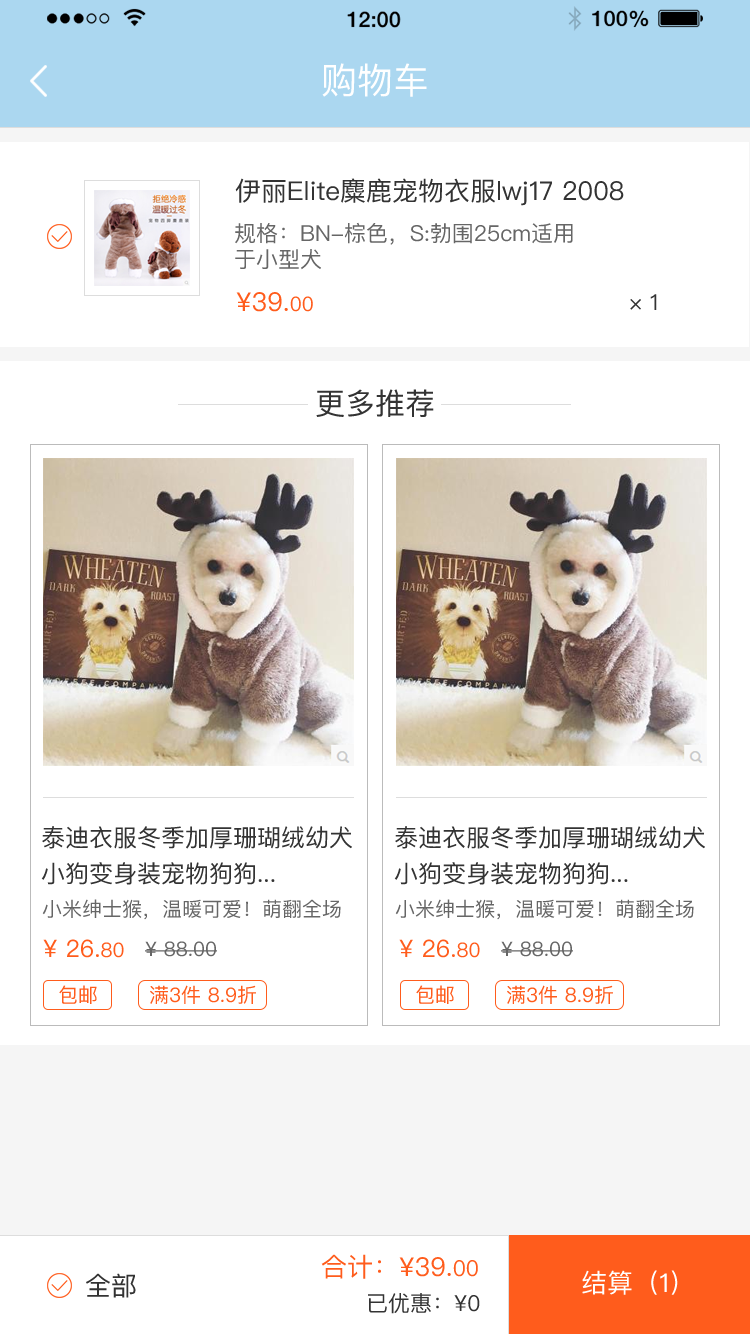
<style>
.page{position:relative;width:750px;height:1334px;background:#ffffff}
.page>*{position:absolute;margin:0}
.t1{font:36px "PingFangSC";color:#ffffff}
.t2{font:26px "PingFangSC";color:#333333}
.t3{font:22px/26px "PingFangSC";color:#666666}
.t4{font:26px "PingFangSC";color:#ff5c1c}
.t5{font:20px "PingFangSC";color:#ff5c1c}
.t6{font:22px "PingFangSC";color:#333333}
.t7{font:30px "PingFangSC";color:#333333}
.t8{font:24px/36px "PingFangSC";color:#333333}
.t9{font:20px "PingFangSC";color:#666666}
.t10{font:24px "PingFangSC";color:#ff5c1c}
.t11{font:22px "PingFangSC";color:#ff5c1c}
.t12{font:26px "PingFangSC";color:#ffffff}
</style>
<div class="page">
<p class="t1" style="left:322px;top:63px;width:105px;height:34px">购物车</p>
<p class="t2" style="left:235px;top:178px;width:389px;height:28px">伊丽Elite麋鹿宠物衣服lwj17 2008</p>
<p class="t3" style="left:235px;top:222px;width:338px;height:48px">规格：BN-棕色，S:勃围25cm适用<br>于小型犬</p>
<p class="t4" style="left:236px;top:292px;width:77px;height:20px">¥39.<span class="t5">00</span></p>
<p class="t6" style="left:630px;top:294px;width:27px;height:16px">× 1</p>
<p class="t7" style="left:316px;top:389px;width:118px;height:28px">更多推荐</p>
<p class="t8" style="left:41px;top:826px;width:311px;height:59px">泰迪衣服冬季加厚珊瑚绒幼犬<br>小狗变身装宠物狗狗...</p>
<p class="t8" style="left:394px;top:826px;width:311px;height:59px">泰迪衣服冬季加厚珊瑚绒幼犬<br>小狗变身装宠物狗狗...</p>
<p class="t9" style="left:42px;top:899px;width:299px;height:21px">小米绅士猴，温暖可爱！萌翻全场</p>
<p class="t9" style="left:395px;top:899px;width:299px;height:21px">小米绅士猴，温暖可爱！萌翻全场</p>
<p class="t10" style="left:43px;top:939px;width:81px;height:19px">¥ 26.<span class="t5">80</span></p>
<p class="t9" style="left:145px;top:941px;width:72px;height:16px">¥ 88.00</p>
<p class="t10" style="left:399px;top:939px;width:81px;height:19px">¥ 26.<span class="t5">80</span></p>
<p class="t9" style="left:501px;top:941px;width:72px;height:16px">¥ 88.00</p>
<p class="t5" style="left:59px;top:985px;width:38px;height:19px">包邮</p>
<p class="t5" style="left:150px;top:985px;width:106px;height:19px">满3件 8.9折</p>
<p class="t5" style="left:416px;top:985px;width:38px;height:19px">包邮</p>
<p class="t5" style="left:507px;top:985px;width:106px;height:19px">满3件 8.9折</p>
<p class="t4" style="left:321px;top:1254px;width:157px;height:25px">合计：¥39.<span class="t11">00</span></p>
<p class="t2" style="left:86px;top:1273px;width:50px;height:25px">全部</p>
<p class="t12" style="left:582px;top:1270px;width:96px;height:25px">结算（1）</p>
<p class="t6" style="left:368px;top:1293px;width:112px;height:21px">已优惠：¥0</p>
</div>
